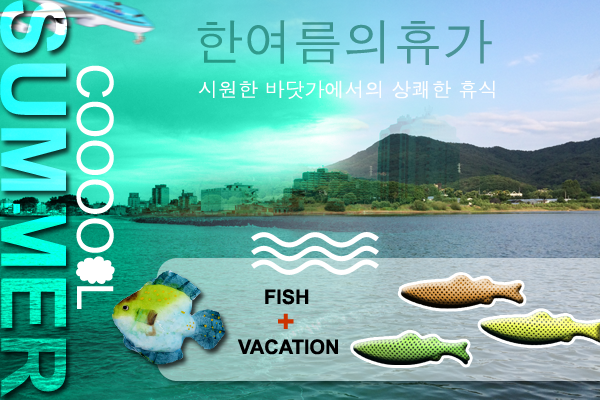
<style>
.page{position:relative;width:600px;height:400px}
.page>*{position:absolute;margin:0}
.t1{font:90px "Arial-BoldMT";text-transform:uppercase}
.t2{font:50px "Dotum";color:#3d9792;text-transform:uppercase}
.t3{font:50px "ArialMT";color:#ffffff;text-transform:uppercase}
.t4{font:20px "Dotum";color:#fefefe;text-transform:uppercase}
.t5{font:20px "Arial-BoldMT";color:#000000;text-transform:uppercase}
.t6{font:30px "Arial-BoldMT";color:#cc3300;text-transform:uppercase}
</style>
<div class="page">
<p class="t1" style="left:0px;top:0px;width:67px;height:397px;rotate:90deg">summer</p>
<p class="t2" style="left:197px;top:20px;width:295px;height:45px">한여름의휴가</p>
<p class="t3" style="left:76px;top:65px;width:38px;height:244px;rotate:90deg">coooo  l</p>
<p class="t4" style="left:198px;top:80px;width:297px;height:19px">시원한 바닷가에서의 상쾌한 휴식</p>
<p class="t5" style="left:265px;top:289px;width:44px;height:16px">fish</p>
<p class="t6" style="left:278px;top:313px;width:16px;height:16px">+</p>
<p class="t5" style="left:237px;top:339px;width:101px;height:16px">vacation</p>
</div>
